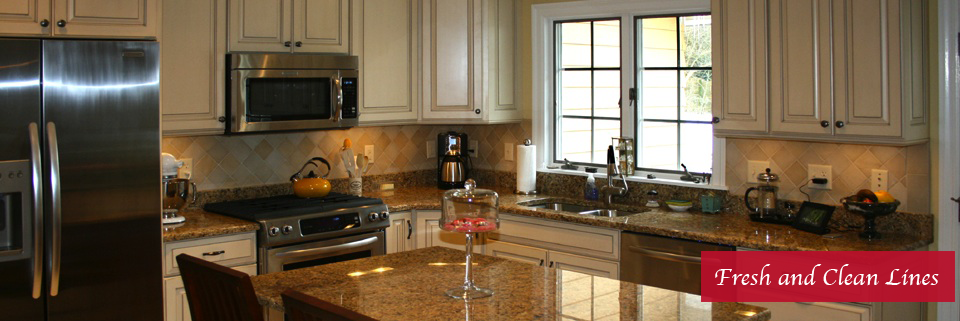
<style>
.page{position:relative;width:960px;height:321px}
.page>*{position:absolute;margin:0}
.t1{font:24px "Apple-Chancery";color:#ffffff}
</style>
<div class="page">
<p class="t1" style="left:715px;top:264px;width:224px;height:22px">Fresh and Clean Lines</p>
</div>
